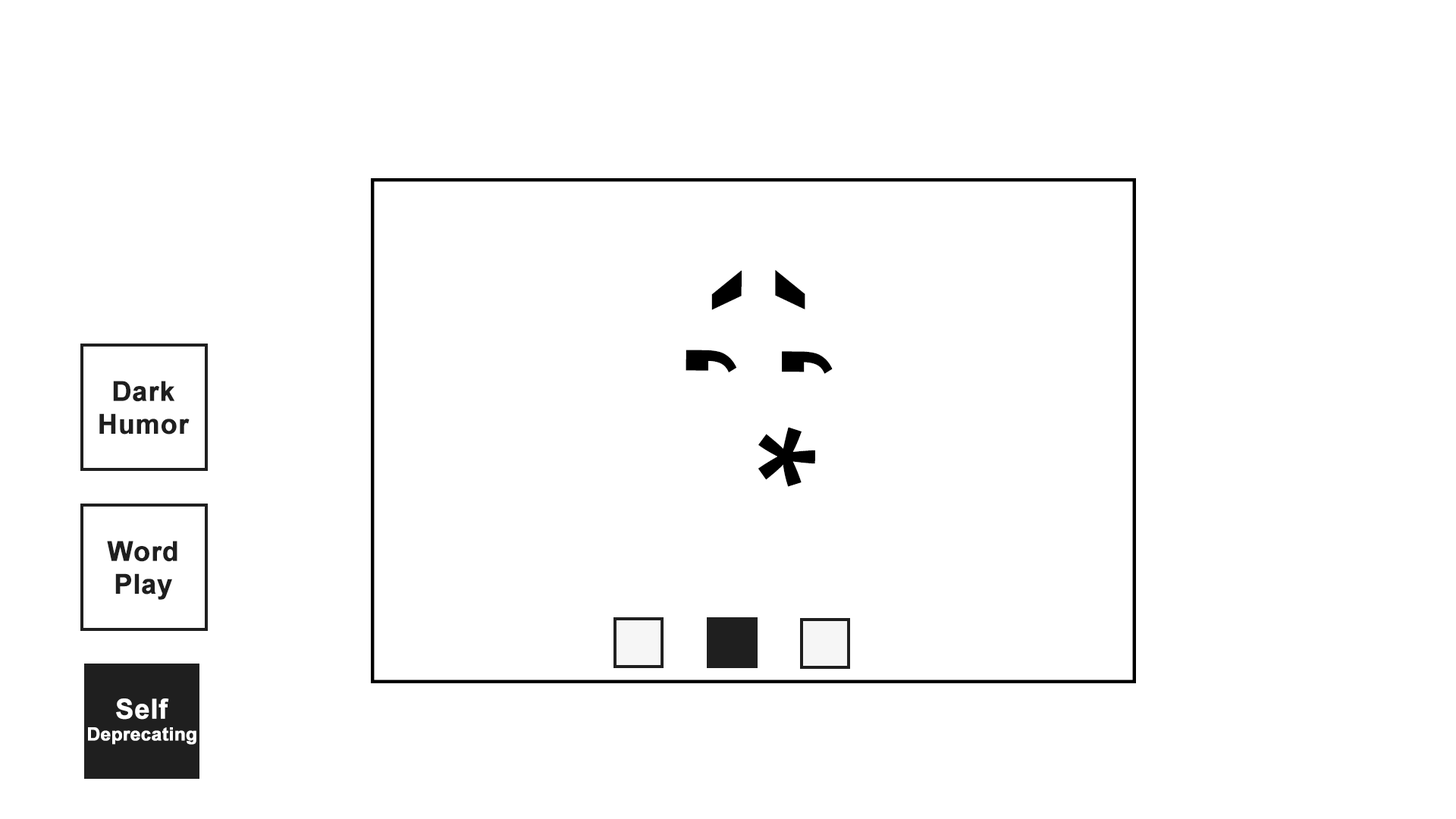
<style>
.page{position:relative;width:1456px;height:819px;background:#ffffff}
.page>*{position:absolute;margin:0}
.t1{font:213px "ArialMT";color:#000000;font-weight:bold}
.t2{font:213.1px "ArialMT";color:#000000;font-weight:bold}
.t3{font:212.9px "ArialMT";color:#000000;font-weight:bold}
.t4{font:27.3px "Arial-BoldMT";color:#1f1f1f;font-weight:bold}
.t5{font:184.9px "ArialMT";color:#000000;font-weight:bold}
.t6{font:18.2px "Arial-BoldMT";color:#ffffff;font-weight:bold}
.t7{font:27.3px "Arial-BoldMT";color:#ffffff;font-weight:bold}
</style>
<div class="page">
<p class="t1" style="left:711px;top:270px;width:31px;height:40px;rotate:90deg">`</p>
<p class="t1" style="left:775px;top:270px;width:30px;height:39px;rotate:90deg">`</p>
<p class="t2" style="left:686px;top:350px;width:51px;height:22px;rotate:90deg">‘</p>
<p class="t3" style="left:782px;top:351px;width:51px;height:23px;rotate:90deg">‘</p>
<p class="t4" style="left:99px;top:381px;width:91px;height:54px;text-align:center">Dark<br>Humor</p>
<p class="t5" style="left:758px;top:427px;width:57px;height:60px;rotate:90deg">*</p>
<p class="t4" style="left:107px;top:541px;width:70px;height:59px;text-align:center">Word<br>Play</p>
<p class="t6" style="left:88px;top:698px;width:108px;height:47px;text-align:center"><span class="t7">Self<br></span>Deprecating</p>
</div>
